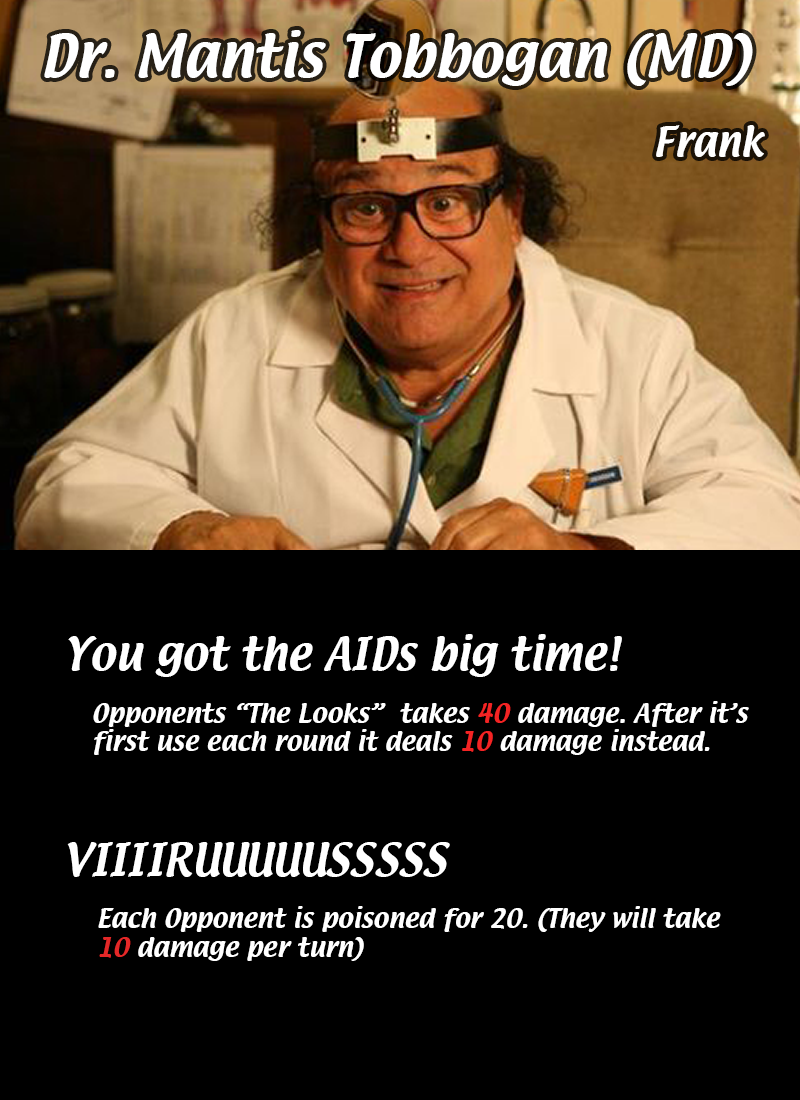
<style>
.page{position:relative;width:800px;height:1100px;background:#000000}
.page>*{position:absolute;margin:0}
.t1{font:52px "Textile";color:#ffffff}
.t2{font:36px "Textile";color:#ffffff}
.t3{font:40px "Textile";color:#ffffff}
.t4{font:24px "Textile";color:#ffffff}
.t5{font:24px "Textile";color:#f32424}
.t6{font:24px "Textile";color:#f42424}
.t7{font:24px "Textile";color:#e42828}
</style>
<div class="page">
<p class="t1" style="left:44px;top:30px;width:709px;height:56px">Dr. Mantis Tobbogan (MD)</p>
<p class="t2" style="left:656px;top:125px;width:109px;height:32px">Frank</p>
<p class="t3" style="left:68px;top:634px;width:554px;height:43px">You got the AIDs big time!</p>
<p class="t4" style="left:93px;top:701px;width:656px;height:54px">Opponents “The Looks”  takes <span class="t5">40 </span>damage. After it’s first use each round it deals <span class="t6">10</span> damage instead.</p>
<p class="t3" style="left:67px;top:842px;width:383px;height:35px">VIIIIRUUUUUSSSSS</p>
<p class="t4" style="left:98px;top:906px;width:623px;height:55px">Each Opponent is poisoned for 20. (They will take <span class="t7">10</span> damage per turn)</p>
</div>
